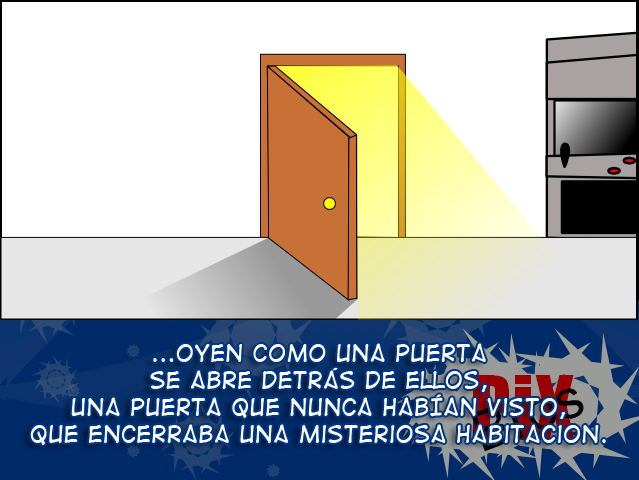
<style>
.page{position:relative;width:639px;height:480px;background:#ffffff}
.page>*{position:absolute;margin:0}
.t1{font:22.4px "DigitalStrip2";color:#ffffff}
</style>
<div class="page">
<p class="t1" style="left:30px;top:343px;width:576px;height:102px;text-align:center">...oyen como una puerta <br>se abre detrás de ellos, <br>una puerta que nunca habían visto, <br>que encerraba una misteriosa habitacion.</p>
</div>
